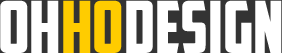
<style>
.page{position:relative;width:282px;height:53px;background:#ffffff}
.page>*{position:absolute;margin:0}
.t1{font:72.1px "AmericanCaptain";color:#ffffff}
.t2{font:72.1px "AmericanCaptain";color:#ffcc00}
</style>
<div class="page">
<p class="t1" style="left:0px;top:0px;width:282px;height:53px">oh<span class="t2">Ho</span>Design</p>
</div>
